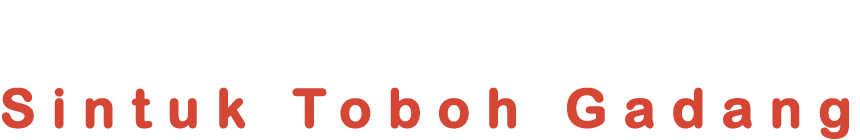
<style>
.page{position:relative;width:860px;height:140px;background:#ffffff}
.page>*{position:absolute;margin:0}
.t1{font:52.9px "ArialRoundedMTBold";letter-spacing:0.289em;color:#d64635;font-weight:bold}
</style>
<div class="page">
<p class="t1" style="left:2px;top:87px;width:847px;height:52px">Sintuk Toboh Gadang</p>
</div>
